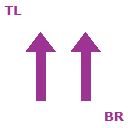
<style>
.page{position:relative;width:128px;height:128px;background:#ffffff}
.page>*{position:absolute;margin:0}
.t1{font:13px "Verdana-Bold";color:#9d3293}
</style>
<div class="page">
<p class="t1" style="left:4px;top:6px;width:18px;height:9px">TL</p>
<p class="t1" style="left:105px;top:112px;width:19px;height:9px">BR</p>
</div>
